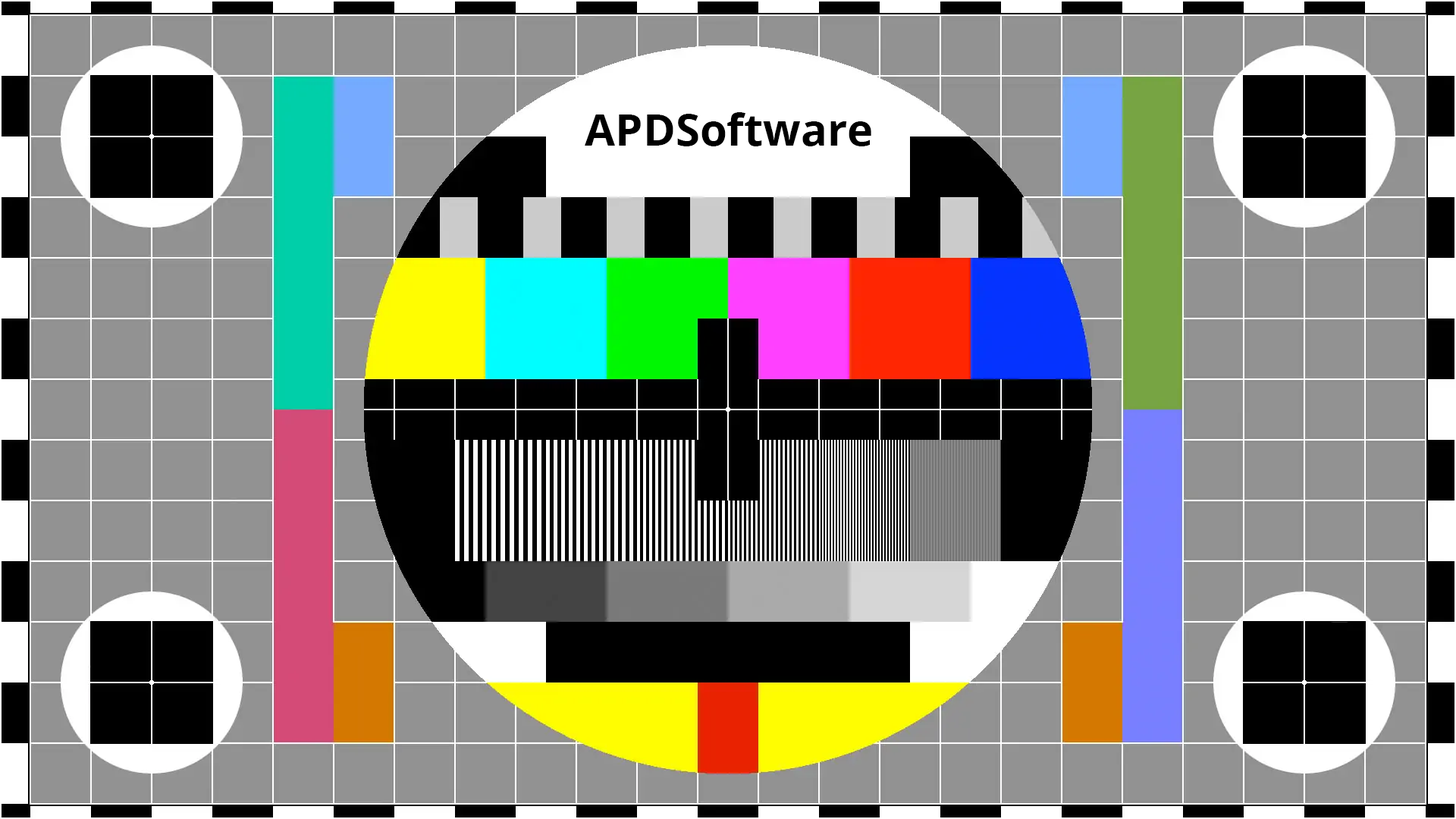
<style>
.page{position:relative;width:1456px;height:819px;background:#929292}
.page>*{position:absolute;margin:0}
.t1{font:44px "OpenSans-Bold";color:#000000}
</style>
<div class="page">
<p class="t1" style="left:585px;top:112px;width:286px;height:34px">APDSoftware</p>
</div>
